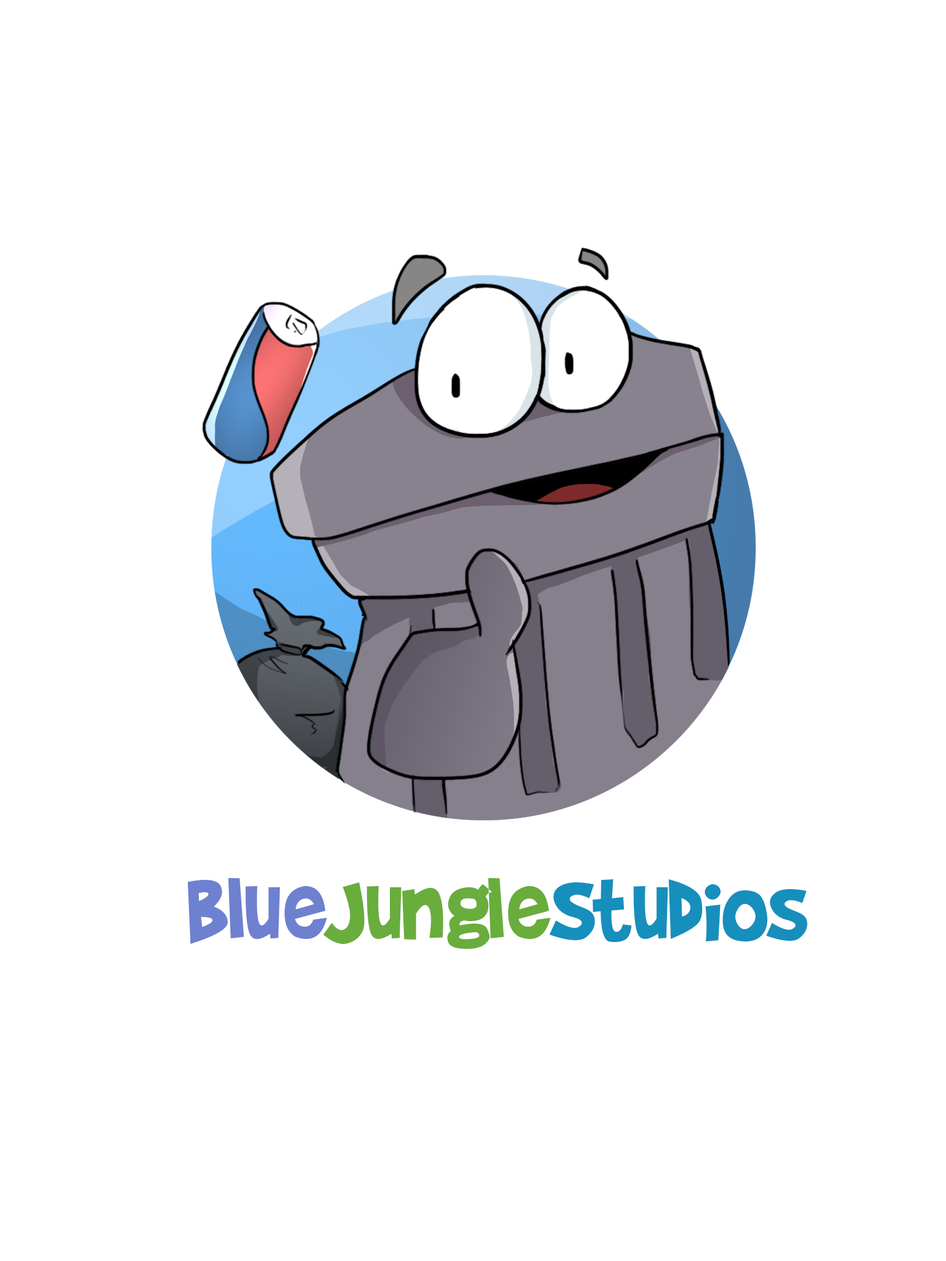
<style>
.page{position:relative;width:946px;height:1261px;background:#ffffff}
.page>*{position:absolute;margin:0}
.t1{font:99.4px "BradyBunchRemastered";color:#168fbc}
.t2{font:99.4px "BradyBunchRemastered";color:#6e81d0}
.t3{font:99.4px "BradyBunchRemastered";color:#69ad3c}
</style>
<div class="page">
<p class="t1" style="left:187px;top:878px;width:620px;height:71px"><span class="t2">Blue</span><span class="t3">Jungle</span>Studios</p>
</div>
